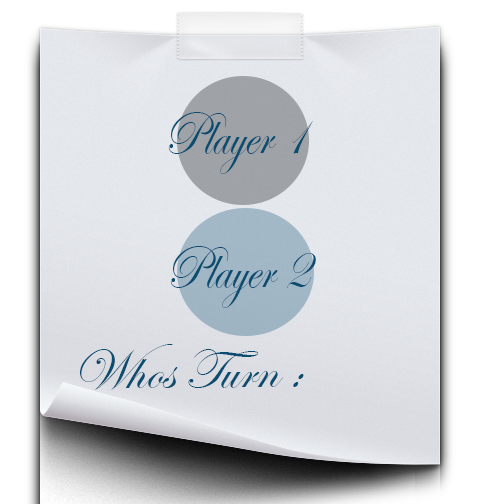
<style>
.page{position:relative;width:504px;height:504px}
.page>*{position:absolute;margin:0}
.t1{font:62.6px "EdwardianScriptITC";color:#0b4c71;scale:0.82 1}
.t2{font:57.3px "EdwardianScriptITC";color:#0b4c71;scale:1.04 1}
</style>
<div class="page">
<p class="t1" style="left:168px;top:112px;width:145px;height:62px">Player 1</p>
<p class="t1" style="left:170px;top:246px;width:146px;height:62px">Player 2</p>
<p class="t2" style="left:80px;top:344px;width:224px;height:46px">Whos Turn :</p>
</div>
